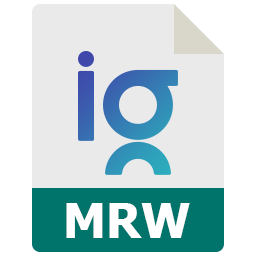
<style>
.page{position:relative;width:256px;height:256px;background:#eaeaea}
.page>*{position:absolute;margin:0}
.t1{font:48px "Tahoma-Bold";color:#ffffff}
</style>
<div class="page">
<p class="t1" style="left:66px;top:203px;width:124px;height:35px">MRW</p>
</div>
